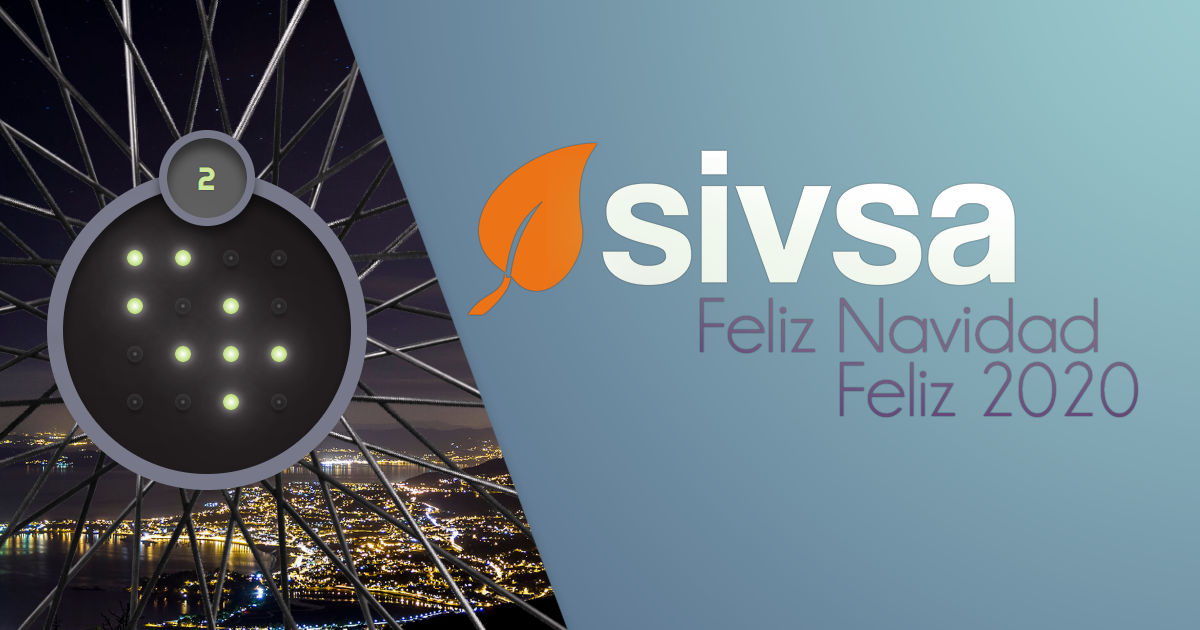
<style>
.page{position:relative;width:1200px;height:630px}
.page>*{position:absolute;margin:0}
.t1{font:77.9px "Champagne&Limousines";color:#7a6786}
.t2{font:77.9px "Champagne&Limousines";color:#6e4e82}
</style>
<div class="page">
<p class="t1" style="left:700px;top:298px;width:398px;height:55px">Feliz Navidad</p>
<p class="t2" style="left:840px;top:361px;width:298px;height:56px">Feliz 2020</p>
</div>
